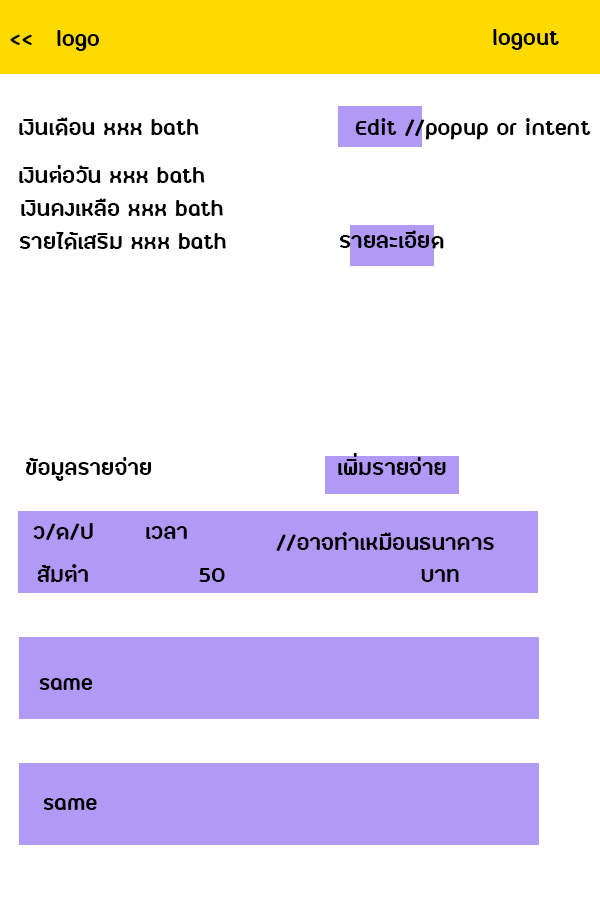
<style>
.page{position:relative;width:600px;height:900px;background:#ffffff}
.page>*{position:absolute;margin:0}
.t1{font:30px "FCLamoonBold";color:#000000}
</style>
<div class="page">
<p class="t1" style="left:57px;top:30px;width:42px;height:21px">logo</p>
<p class="t1" style="left:493px;top:29px;width:66px;height:21px">logout</p>
<p class="t1" style="left:10px;top:34px;width:22px;height:11px">&lt;&lt;</p>
<p class="t1" style="left:19px;top:117px;width:180px;height:19px">เงินเดือน xxx bath</p>
<p class="t1" style="left:355px;top:118px;width:236px;height:22px">Edit //popup or intent</p>
<p class="t1" style="left:19px;top:165px;width:186px;height:18px">เงินต่อวัน xxx bath</p>
<p class="t1" style="left:21px;top:198px;width:202px;height:18px">เงินคงเหลือ xxx bath</p>
<p class="t1" style="left:20px;top:231px;width:206px;height:19px">รายได้เสริม xxx bath</p>
<p class="t1" style="left:340px;top:230px;width:104px;height:19px">รายละเอียด</p>
<p class="t1" style="left:26px;top:457px;width:125px;height:24px">ข้อมูลรายจ่าย</p>
<p class="t1" style="left:338px;top:453px;width:108px;height:23px">เพิ่มรายจ่าย</p>
<p class="t1" style="left:33px;top:523px;width:60px;height:17px">ว/ด/ป</p>
<p class="t1" style="left:146px;top:526px;width:41px;height:13px">เวลา</p>
<p class="t1" style="left:276px;top:532px;width:218px;height:19px">//อาจทำเหมือนธนาคาร</p>
<p class="t1" style="left:37px;top:564px;width:422px;height:19px">ส้มตำ              50                         บาท</p>
<p class="t1" style="left:39px;top:678px;width:54px;height:12px">same</p>
<p class="t1" style="left:43px;top:798px;width:54px;height:12px">same</p>
</div>
